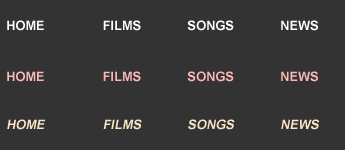
<style>
.page{position:relative;width:345px;height:150px;background:#333333}
.page>*{position:absolute;margin:0}
.t1{font:12.8px "Arial-BoldMT";color:#ffffff;text-transform:uppercase}
.t2{font:12.8px "Arial-BoldMT";color:#fcb7b7;text-transform:uppercase}
.t3{font:12.8px "Arial-BoldMT";color:#fcb6b6;text-transform:uppercase}
.t4{font:12.8px "Arial-BoldMT";color:#f9e5c3;text-transform:uppercase;font-style:italic}
.t5{font:12.8px "Arial-BoldMT";color:#f9e5c3;text-transform:uppercase}
</style>
<div class="page">
<p class="t1" style="left:7px;top:20px;width:37px;height:11px">home</p>
<p class="t1" style="left:103px;top:20px;width:215px;height:11px">films             songs             News</p>
<p class="t2" style="left:7px;top:71px;width:37px;height:11px">home</p>
<p class="t3" style="left:103px;top:71px;width:215px;height:11px">films             songs             News</p>
<p class="t4" style="left:7px;top:119px;width:38px;height:11px">home</p>
<p class="t4" style="left:103px;top:119px;width:216px;height:11px"><span class="t5">                            </span>films             songs             News</p>
</div>
